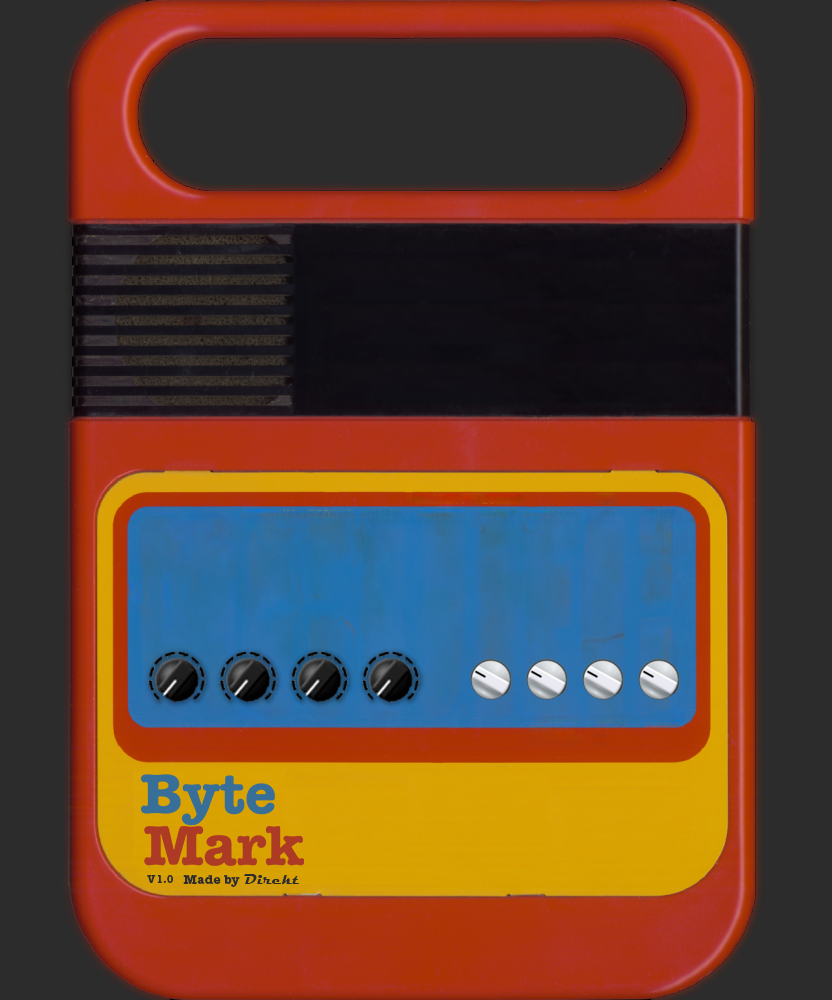
<style>
.page{position:relative;width:832px;height:1000px;background:#2c2c2c}
.page>*{position:absolute;margin:0}
.t1{font:10.6px "AmericanTypewriterLT-Bold";letter-spacing:0.025em;color:#2c2c2c}
.t2{font:12.5px "AmericanTypewriterLT-Bold";letter-spacing:0.025em;color:#2c2c2c}
.t3{font:14.6px "Magneto-Bold";letter-spacing:0.05em;color:#2c2c2c}
</style>
<div class="page">
<p class="t1" style="left:147px;top:875px;width:26px;height:8px">V1.0</p>
<p class="t2" style="left:183px;top:874px;width:117px;height:13px">Made by <span class="t3">Direkt</span></p>
</div>
